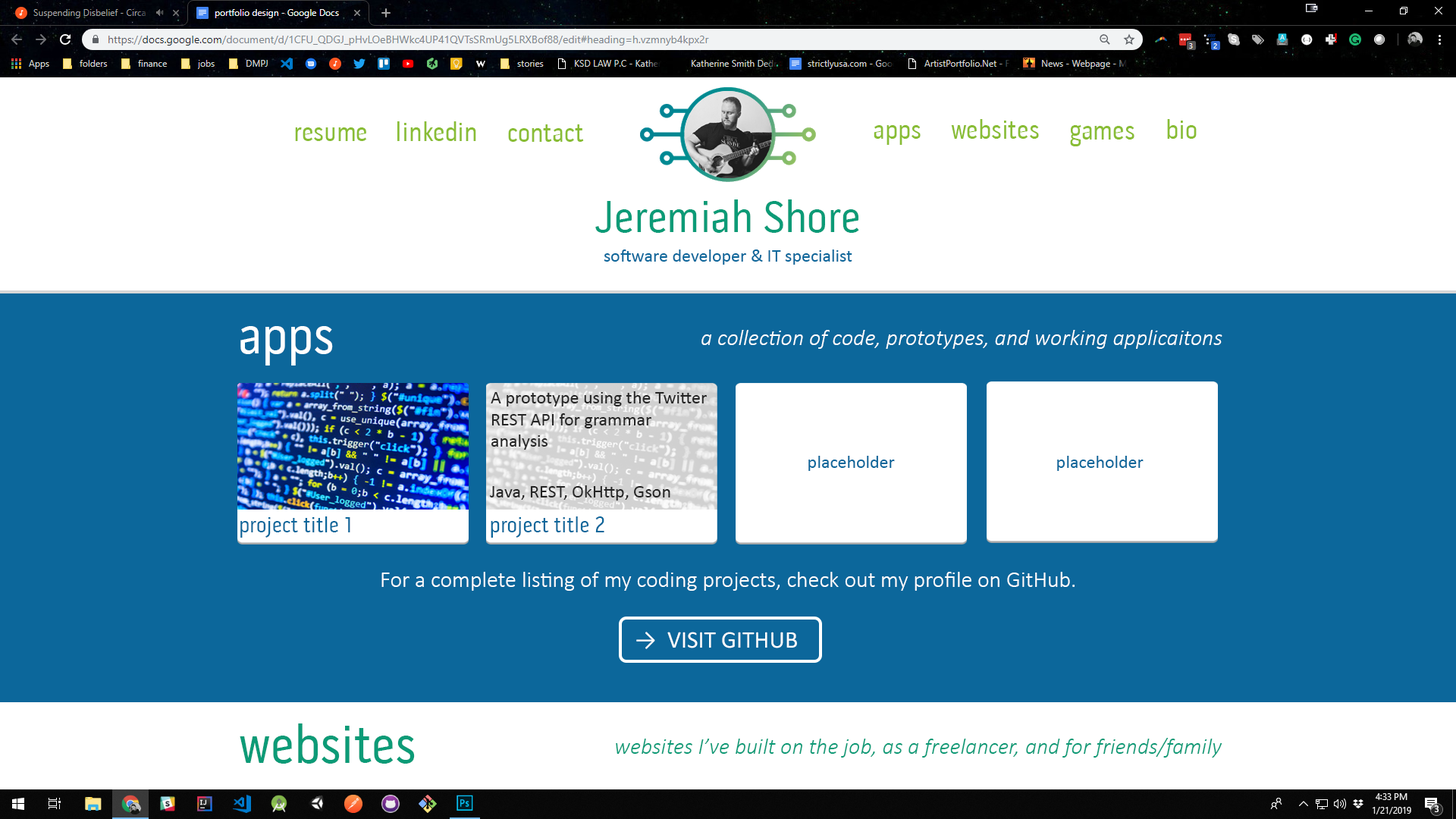
<style>
.page{position:relative;width:1456px;height:819px;background:#ffffff}
.page>*{position:absolute;margin:0}
.t1{font:27.3px "PillGothic300mg-Regular";color:#89bd35}
.t2{font:45.5px "PillGothic300mg-Regular";color:#0c9b77}
.t3{font:18.2px "Calibri";color:#0c679b}
.t4{font:54.6px "PillGothic300mg-Regular";color:#ffffff}
.t5{font:22.7px "Calibri-LightItalic";color:#ffffff}
.t6{font:18.2px "Calibri";color:#252525}
.t7{font:22.7px "PillGothic300mg-Regular";color:#0c679b}
.t8{font:22.7px "Calibri-Light";color:#ffffff}
.t9{font:24px "Calibri";color:#ffffff}
.t10{font:54.6px "PillGothic300mg-Regular";color:#0c9b77}
.t11{font:22.7px "Calibri-LightItalic";color:#0c9b77}
</style>
<div class="page">
<p class="t1" style="left:397px;top:121px;width:79px;height:20px">linkedin</p>
<p class="t1" style="left:508px;top:124px;width:76px;height:18px">contact</p>
<p class="t1" style="left:874px;top:125px;width:47px;height:20px">apps</p>
<p class="t1" style="left:951px;top:119px;width:88px;height:20px">websites</p>
<p class="t1" style="left:1070px;top:125px;width:64px;height:21px">games</p>
<p class="t1" style="left:1167px;top:119px;width:30px;height:20px">bio</p>
<p class="t1" style="left:295px;top:127px;width:72px;height:14px">resume</p>
<p class="t2" style="left:595px;top:199px;width:264px;height:34px">Jeremiah Shore</p>
<p class="t3" style="left:604px;top:249px;width:248px;height:16px">software developer &amp; IT specialist</p>
<p class="t4" style="left:240px;top:326px;width:93px;height:40px">apps</p>
<p class="t5" style="left:701px;top:330px;width:521px;height:19px">a collection of code, prototypes, and working applicaitons</p>
<p class="t6" style="left:491px;top:391px;width:216px;height:59px">A prototype using the Twitter<br>REST API for grammar<br>analysis</p>
<p class="t3" style="left:808px;top:456px;width:87px;height:15px">placeholder</p>
<p class="t3" style="left:1057px;top:456px;width:87px;height:15px">placeholder</p>
<p class="t6" style="left:490px;top:485px;width:180px;height:15px">Java, REST, OkHttp, Gson</p>
<p class="t7" style="left:240px;top:516px;width:110px;height:22px">project title 1</p>
<p class="t7" style="left:491px;top:516px;width:113px;height:22px">project title 2</p>
<p class="t8" style="left:381px;top:572px;width:694px;height:19px">For a complete listing of my coding projects, check out my profile on GitHub.</p>
<p class="t9" style="left:636px;top:632px;width:161px;height:17px">→  VISIT GITHUB</p>
<p class="t10" style="left:240px;top:723px;width:175px;height:41px">websites</p>
<p class="t11" style="left:616px;top:738px;width:606px;height:20px">websites I’ve built on the job, as a freelancer, and for friends/family</p>
</div>
